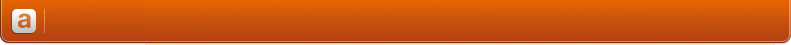
<style>
.page{position:relative;width:791px;height:45px}
.page>*{position:absolute;margin:0}
.t1{font:26px "Inter-Bold";letter-spacing:-0.075em;color:#cf6d2a}
</style>
<div class="page">
<p class="t1" style="left:18px;top:13px;width:13px;height:15px">a</p>
</div>
